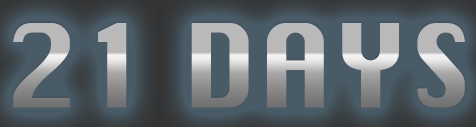
<style>
.page{position:relative;width:476px;height:127px;background:#485b66}
.page>*{position:absolute;margin:0}
.t1{font:112.2px "Silom"}
</style>
<div class="page">
<p class="t1" style="left:13px;top:23px;width:452px;height:85px">21 DAYS</p>
</div>
